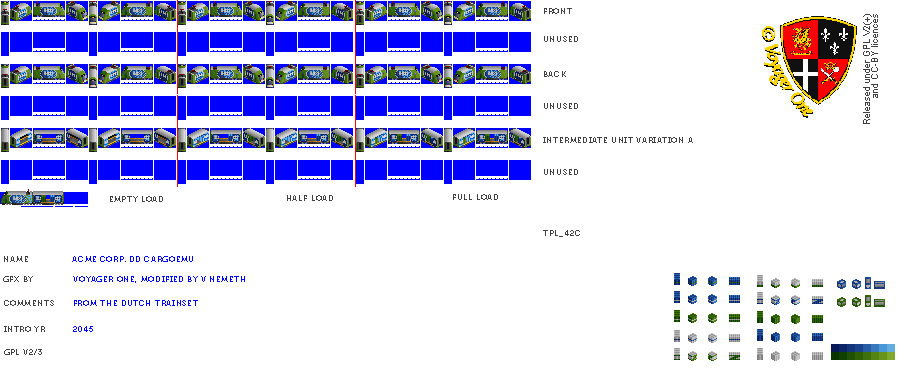
<style>
.page{position:relative;width:900px;height:370px;background:#ffffff}
.page>*{position:absolute;margin:0}
.t1{font:8px "Museo700-Regular";letter-spacing:0.075em;color:#404040;text-transform:uppercase}
.t2{font:8px "Museo700-Regular";letter-spacing:0.075em;color:#0000ff;text-transform:uppercase}
</style>
<div class="page">
<p class="t1" style="left:544px;top:8px;width:28px;height:6px">front</p>
<p class="t1" style="left:544px;top:36px;width:34px;height:6px">unused</p>
<p class="t1" style="left:544px;top:71px;width:22px;height:6px">back</p>
<p class="t1" style="left:544px;top:103px;width:34px;height:6px">unused</p>
<p class="t1" style="left:543px;top:137px;width:150px;height:6px">intermediate unit variation a</p>
<p class="t1" style="left:544px;top:169px;width:34px;height:6px">unused</p>
<p class="t1" style="left:110px;top:196px;width:53px;height:6px">EMPTY LOAD</p>
<p class="t1" style="left:287px;top:195px;width:46px;height:6px">HALF LOAD</p>
<p class="t1" style="left:453px;top:194px;width:45px;height:6px">FULL LOAD</p>
<p class="t1" style="left:543px;top:230px;width:37px;height:7px">tpl_42c</p>
<p class="t1" style="left:4px;top:256px;width:24px;height:6px">name</p>
<p class="t2" style="left:72px;top:256px;width:121px;height:6px">ACME Corp. DD CargoEMU</p>
<p class="t1" style="left:3px;top:276px;width:30px;height:6px">gfx by</p>
<p class="t2" style="left:73px;top:276px;width:172px;height:7px">voyager one, modified by v nemeth</p>
<p class="t1" style="left:4px;top:300px;width:50px;height:6px">comments</p>
<p class="t2" style="left:74px;top:300px;width:124px;height:6px">from the dutch trainset</p>
<p class="t1" style="left:4px;top:326px;width:41px;height:6px">intro yr</p>
<p class="t2" style="left:73px;top:326px;width:20px;height:6px">2045</p>
<p class="t1" style="left:4px;top:349px;width:38px;height:6px">gpl v2/3</p>
</div>
